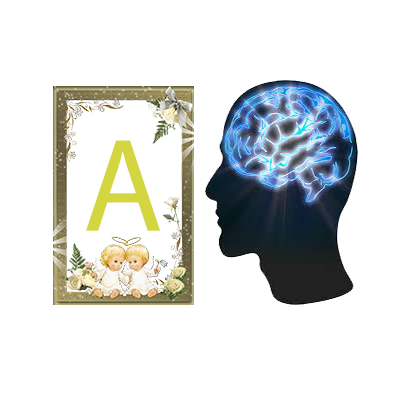
<style>
.page{position:relative;width:400px;height:400px;background:#ffffff}
.page>*{position:absolute;margin:0}
.t1{font:133.4px "MyriadPro-Regular";color:#d4d63f}
</style>
<div class="page">
<p class="t1" style="left:86px;top:140px;width:74px;height:91px">A</p>
</div>
